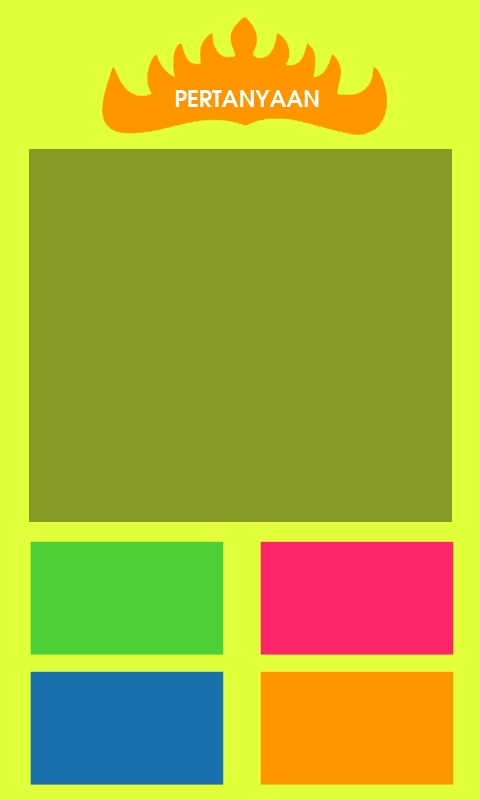
<style>
.page{position:relative;width:480px;height:800px;background:#889924}
.page>*{position:absolute;margin:0}
.t1{font:22.8px "AvantGarde-Demi";color:#ffffff}
</style>
<div class="page">
<p class="t1" style="left:175px;top:90px;width:144px;height:17px">PERTANYAAN</p>
</div>
